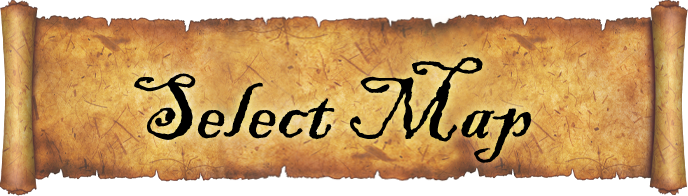
<style>
.page{position:relative;width:688px;height:196px}
.page>*{position:absolute;margin:0}
.t1{font:94.5px "BlackadderITC-Regular";color:#000000}
</style>
<div class="page">
<p class="t1" style="left:134px;top:57px;width:398px;height:106px">Select Map</p>
</div>
